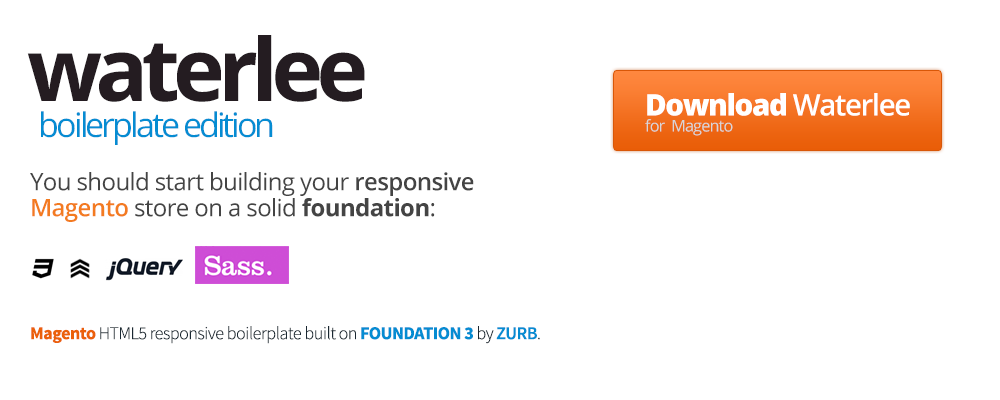
<style>
.page{position:relative;width:1000px;height:400px;background:#ffffff}
.page>*{position:absolute;margin:0}
.t1{font:86.4px "OpenSans-Bold";letter-spacing:-0.075em;color:#241c21}
.t2{font:16.2px/16.2px "OpenSans";letter-spacing:-0.05em;color:#d7d7d7}
.t3{font:29.7px/16.2px "OpenSans-Extrabold";letter-spacing:-0.05em;color:#ffffff}
.t4{font:29.7px/16.2px "OpenSans-Semibold";letter-spacing:-0.05em;color:#ffffff}
.t5{font:29.7px/40.5px "OpenSans-Extrabold";letter-spacing:-0.05em;color:#ffffff}
.t6{font:33.8px "OpenSans";letter-spacing:-0.088em;color:#058cd2}
.t7{font:24px/26px "OpenSans";letter-spacing:-0.025em;color:#444444}
.t8{font:24px/26px "OpenSans-Semibold";letter-spacing:-0.025em;color:#444444}
.t9{font:24px/26px "OpenSans-Semibold";letter-spacing:-0.025em;color:#f37b20}
.t10{font:24px/26px "OpenSans-Bold";letter-spacing:-0.025em;color:#444444}
.t11{font:18px "SourceSansPro-Light";letter-spacing:-0.025em;color:#192731}
.t12{font:18px "SourceSansPro-Bold";letter-spacing:-0.025em;color:#eb600b}
.t13{font:18px "SourceSansPro-Bold";letter-spacing:-0.025em;color:#058cd2}
.t14{font:18px "SourceSansPro-Semibold";letter-spacing:-0.025em;color:#058cd2}
</style>
<div class="page">
<p class="t1" style="left:27px;top:35px;width:338px;height:67px">waterlee</p>
<p class="t1" style="left:28px;top:35px;width:338px;height:68px">waterlee</p>
<p class="t2" style="left:645px;top:93px;width:265px;height:43px"><span class="t3">Download </span><span class="t4">Waterlee</span><span class="t5"> <br></span>for  Magento</p>
<p class="t6" style="left:41px;top:111px;width:232px;height:34px">boilerplate edition</p>
<p class="t7" style="left:30px;top:172px;width:444px;height:50px">You should start building your <span class="t8">responsive </span><span class="t9">Magento</span> store on a solid <span class="t10">foundation</span>:</p>
<p class="t11" style="left:31px;top:326px;width:509px;height:18px"><span class="t12">Magento</span> HTML5 responsive boilerplate built on <span class="t13">FOUNDATION 3</span> by <span class="t14">ZURB</span>.</p>
</div>
